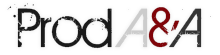
<style>
.page{position:relative;width:220px;height:55px;background:#ffffff}
.page>*{position:absolute;margin:0}
.t1{font:60px "BIRTHOFAHERO";color:#1a1a1a}
.t2{font:60px "BIRTHOFAHERO";color:#cccccc}
.t3{font:60px "BIRTHOFAHERO";color:#800409}
.t4{font:60px "BIRTHOFAHERO";color:#333333}
</style>
<div class="page">
<p class="t1" style="left:7px;top:3px;width:204px;height:46px">Prod <span class="t2">A</span><span class="t3">&amp;</span><span class="t4">A</span></p>
</div>
